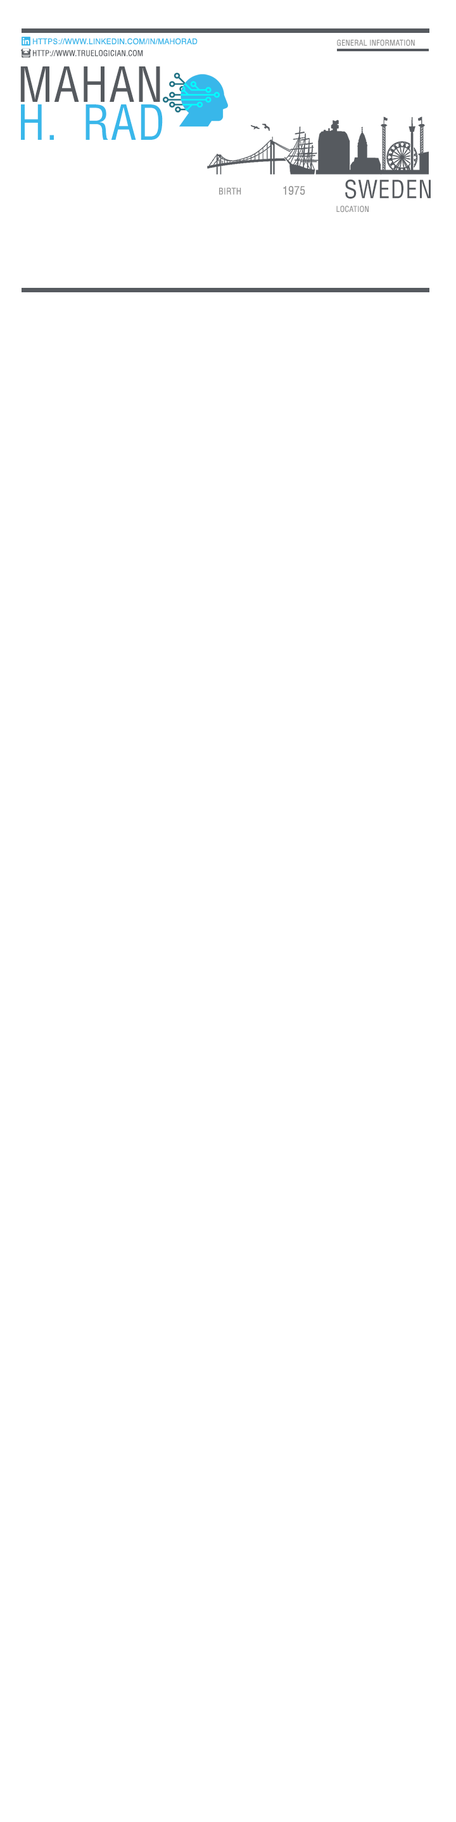
<style>
.page{position:relative;width:456px;height:1822px;background:#ffffff}
.page>*{position:absolute;margin:0}
.t1{font:7.8px "Helvetica";letter-spacing:0.02em;color:#39b7ea}
.t2{font:7.8px "Helvetica-Condensed";letter-spacing:0.02em;color:#949494}
.t3{font:7.8px "Helvetica-Condensed";letter-spacing:0.02em;color:#565a5f}
.t4{font:47.3px "Helvetica-Condensed";letter-spacing:0.021em;color:#565a5f;scale:0.97 1}
.t5{font:47.3px "Helvetica-Condensed";letter-spacing:0.021em;color:#39b7ea;scale:0.97 1}
.t6{font:24.5px "Helvetica-Condensed";letter-spacing:0.021em;color:#565a5f}
.t7{font:9px "Helvetica-Condensed";letter-spacing:0.02em;color:#949494}
.t8{font:11.4px "Helvetica-Condensed";letter-spacing:0.02em;color:#949494}
.t9{font:7.9px "Helvetica-Condensed";letter-spacing:0.02em;color:#949494}
</style>
<div class="page">
<p class="t1" style="left:33px;top:38px;width:164px;height:7px">HTTPS://WWW.LINKEDIN.COM/IN/MAHORAD</p>
<p class="t2" style="left:337px;top:39px;width:77px;height:7px">GENERAL INFORMATION</p>
<p class="t3" style="left:33px;top:50px;width:110px;height:6px">HTTP://WWW.TRUELOGICIAN.COM</p>
<p class="t4" style="left:20px;top:66px;width:140px;height:36px">MAHAN</p>
<p class="t5" style="left:21px;top:104px;width:142px;height:36px">H. RAD</p>
<p class="t6" style="left:345px;top:179px;width:85px;height:20px">SWEDEN</p>
<p class="t7" style="left:219px;top:187px;width:22px;height:8px">BIRTH</p>
<p class="t8" style="left:283px;top:186px;width:22px;height:9px">1975</p>
<p class="t9" style="left:336px;top:206px;width:32px;height:7px">LOCATION</p>
</div>
